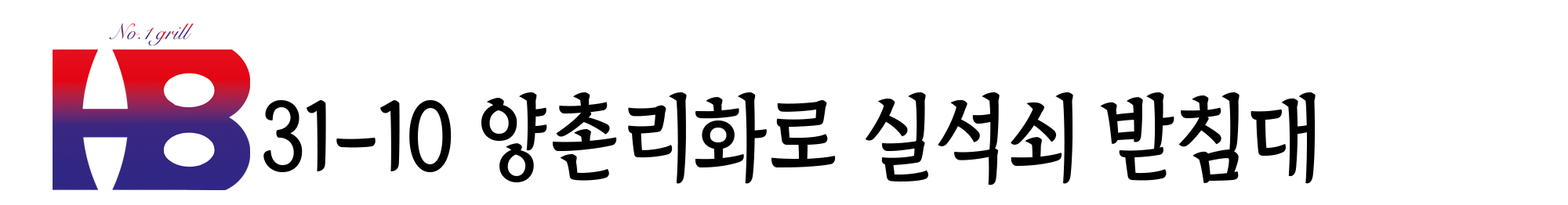
<style>
.page{position:relative;width:1568px;height:205px;background:#ffffff}
.page>*{position:absolute;margin:0}
.t1{font:93.7px "TheIndependenceHallofKorea-Regular";color:#000000;scale:0.89 1}
</style>
<div class="page">
<p class="t1" style="left:263px;top:93px;width:1053px;height:93px">31-10 양촌리화로 실석쇠 받침대</p>
</div>
